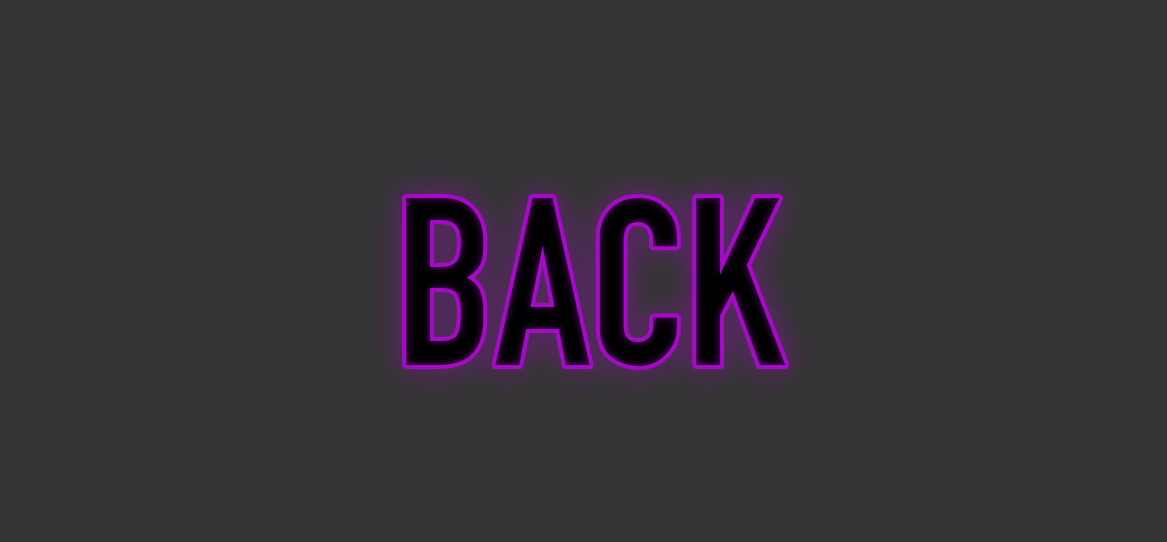
<style>
.page{position:relative;width:1167px;height:542px;background:#333333}
.page>*{position:absolute;margin:0}
.t1{font:233.7px "DINEngschrift";color:#070009}
</style>
<div class="page">
<p class="t1" style="left:406px;top:198px;width:380px;height:168px">BACK</p>
</div>
